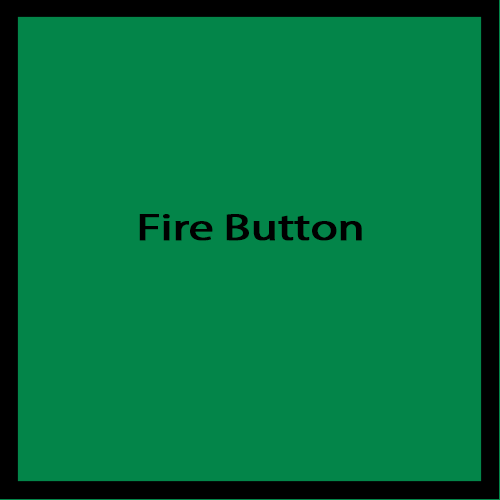
<style>
.page{position:relative;width:500px;height:500px;background:#038549}
.page>*{position:absolute;margin:0}
.t1{font:37.4px "MyriadPro-Regular";letter-spacing:-0.02em;color:#000000;font-weight:bold;scale:1.3 1}
</style>
<div class="page">
<p class="t1" style="left:139px;top:214px;width:223px;height:27px">Fire Button</p>
</div>
